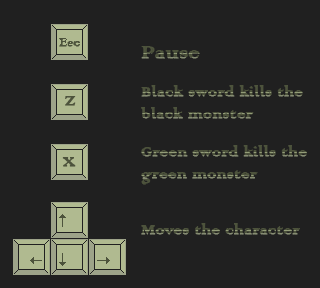
<style>
.page{position:relative;width:320px;height:288px;background:#202020}
.page>*{position:absolute;margin:0}
.t1{font:15px "ColonnaMT";color:#4d533c;font-weight:bold}
.t2{font:24px "ColonnaMT";color:#4d533c;font-weight:bold}
.t3{font:18px "ColonnaMT";color:#4d533c;font-weight:bold}
</style>
<div class="page">
<p class="t1" style="left:59px;top:38px;width:21px;height:9px">Esc</p>
<p class="t2" style="left:141px;top:46px;width:59px;height:13px">Pause</p>
<p class="t3" style="left:141px;top:85px;width:162px;height:34px">Black sword kills the <br>black monster</p>
<p class="t3" style="left:65px;top:96px;width:11px;height:10px">Z</p>
<p class="t3" style="left:141px;top:145px;width:166px;height:40px">Green sword kills the <br>green monster</p>
<p class="t3" style="left:62px;top:157px;width:14px;height:10px">X</p>
<p class="t3" style="left:141px;top:223px;width:159px;height:12px">Moves the character</p>
</div>
